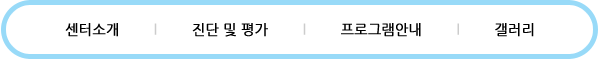
<style>
.page{position:relative;width:600px;height:60px;background:#ffffff}
.page>*{position:absolute;margin:0}
.t1{font:14px "NanumGothic";color:#000000;font-weight:bold}
.t2{font:14px "NanumGothic";color:#cccccc;font-weight:bold}
</style>
<div class="page">
<p class="t1" style="left:65px;top:23px;width:469px;height:14px">센터소개        <span class="t2">l</span>        진단 및 평가        <span class="t2">l</span>        프로그램안내        <span class="t2">l</span>        갤러리</p>
</div>
